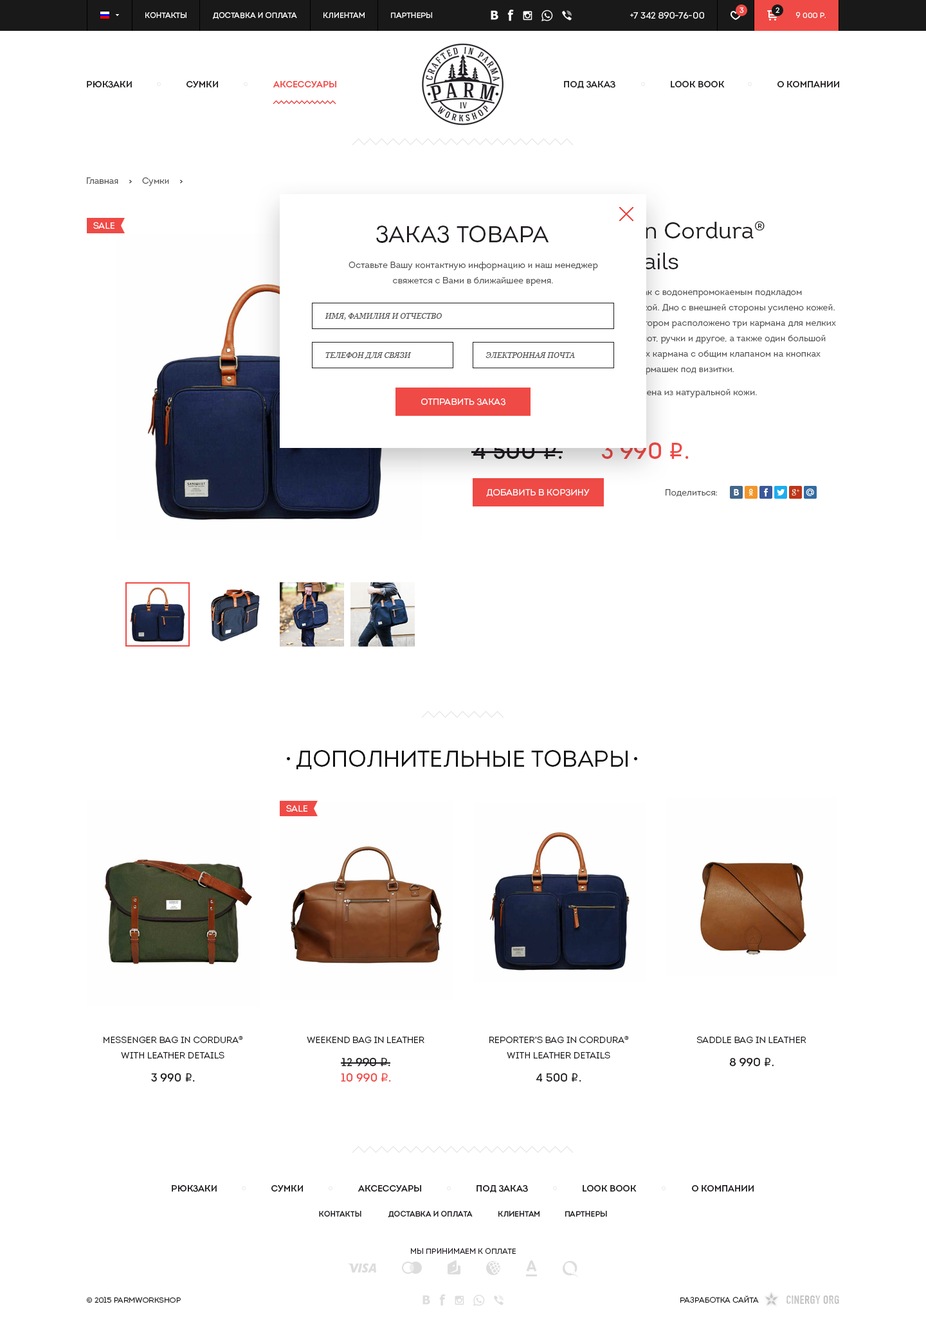
<style>
.page{position:relative;width:926px;height:1322px;background:#ffffff}
.page>*{position:absolute;margin:0}
.t1{font:7.7px "Intro-Book";color:#ffffff;text-transform:uppercase}
.t2{font:9px "Intro-Book";color:#ffffff;text-transform:uppercase}
.t3{font:7.7px "Intro-Book";letter-spacing:0.1em;color:#ffffff;text-transform:uppercase}
.t4{font:9px "Intro-Regular";color:#1f1b20;text-transform:uppercase}
.t5{font:9px "Intro-Regular";color:#ef4a46;text-transform:uppercase}
.t6{font:9px "Intro-Book";color:#555555}
.t7{font:9px "Intro-Book";color:#fefefe;text-transform:uppercase}
.t8{font:23.1px/30.9px "Intro-Book"}
.t9{font:23.1px "Intro-Book";color:#1f1b20;text-transform:uppercase}
.t10{font:9px/15.4px "Intro-Book";color:#555555}
.t11{font:9px/15.4px "Intro-Book"}
.t12{font:9px/23.1px "Intro-Book"}
.t13{font:7.7px "Georgia-Italic";color:#555555;text-transform:uppercase}
.t14{font:23.1px "Intro-Regular";color:#1f1b20}
.t15{font:23.1px "ALSRubl";color:#1f1b20}
.t16{font:23.1px "MyriadPro-Regular";color:#1f1b20}
.t17{font:23.1px "Intro-Regular"}
.t18{font:23.1px "ALSRubl"}
.t19{font:23.1px "MyriadPro-Regular"}
.t20{font:23.1px "Intro-Book";color:#111111;text-transform:uppercase}
.t21{font:9px/15.4px "Intro-Book";color:#1f1b20;text-transform:uppercase}
.t22{font:11.6px/23.1px "Intro-Regular";color:#1f1b20;text-transform:uppercase}
.t23{font:11.6px/23.1px "ALSRubl";color:#1f1b20}
.t24{font:11.6px/23.1px "MyriadPro-Regular";color:#1f1b20}
.t25{font:11.6px/15.4px "Intro-Regular";color:#ef4a46;text-transform:uppercase}
.t26{font:11.6px/15.4px "ALSRubl";color:#ef4a46}
.t27{font:11.6px/15.4px "MyriadPro-Regular";color:#ef4a46}
.t28{font:7.7px "Intro-Regular";color:#1f1b20;text-transform:uppercase}
.t29{font:7.7px "Intro-Book";color:#1f1b20;text-transform:uppercase}
</style>
<div class="page">
<p class="t1" style="left:145px;top:12px;width:41px;height:6px">Контакты</p>
<p class="t1" style="left:213px;top:12px;width:84px;height:7px">Доставка и оплата</p>
<p class="t1" style="left:323px;top:12px;width:41px;height:6px">Клиентам</p>
<p class="t1" style="left:391px;top:12px;width:41px;height:6px">Партнеры</p>
<p class="t2" style="left:630px;top:12px;width:74px;height:7px">+7 342 890-76-00</p>
<p class="t3" style="left:739px;top:7px;width:5px;height:6px">3</p>
<p class="t3" style="left:775px;top:7px;width:4px;height:6px">2</p>
<p class="t1" style="left:796px;top:12px;width:29px;height:6px">9 000 р.</p>
<p class="t4" style="left:87px;top:80px;width:45px;height:8px">Рюкзаки</p>
<p class="t4" style="left:186px;top:80px;width:32px;height:8px">Сумки</p>
<p class="t5" style="left:273px;top:80px;width:63px;height:8px">Аксессуары</p>
<p class="t4" style="left:564px;top:80px;width:51px;height:9px">Под заказ</p>
<p class="t4" style="left:670px;top:80px;width:54px;height:7px">Look Book</p>
<p class="t4" style="left:777px;top:80px;width:62px;height:7px">О компании</p>
<p class="t6" style="left:87px;top:177px;width:82px;height:9px">Главная          Сумки</p>
<p class="t7" style="left:93px;top:222px;width:21px;height:7px">SALE</p>
<p class="t8" style="left:473px;top:221px;width:291px;height:49px">Reporter's bag in Cordura®<br>with leather details</p>
<p class="t9" style="left:376px;top:226px;width:172px;height:17px">Заказ товара</p>
<p class="t10" style="left:348px;top:262px;width:250px;height:24px;text-align:center">Оставьте Вашу контактную информацию и наш менеджер<br>свяжется с Вами в ближайшее время.</p>
<p class="t11" style="left:473px;top:289px;width:363px;height:124px">Большая и вместительная сумка - рюкзак с водонепромокаемым подкладом<br>из нейлона. Задняя стенка усилена пенкой. Дно с внешней стороны усилено кожей.<br>Один внутренний отдел на молнии, в котором расположено три кармана для мелких<br>вещей, таких как телефон, ключи, блокнот, ручки и другое, а также один большой<br>карман на молнии. Два больших внешних кармана с общим клапаном на кнопках<br>и один небольшой внешний кожаный кармашек под визитки.<br><span class="t12">Материал 100% хлопок, отделка выполнена из натуральной кожи.<br></span>Размер 40 x 45 x 12 см.</p>
<p class="t13" style="left:325px;top:313px;width:117px;height:7px">Имя, фамилия и отчество</p>
<p class="t13" style="left:325px;top:352px;width:86px;height:7px">Телефон для связи</p>
<p class="t13" style="left:485px;top:352px;width:90px;height:6px">Электронная почта</p>
<p class="t2" style="left:421px;top:398px;width:84px;height:8px">Отправить заказ</p>
<p class="t14" style="left:473px;top:442px;width:89px;height:17px">4 500 <span class="t15">i</span><span class="t16">.</span></p>
<p class="t17" style="left:601px;top:442px;width:87px;height:17px">3 990 <span class="t18">i</span><span class="t19">.</span></p>
<p class="t2" style="left:486px;top:489px;width:104px;height:8px">Добавить в корзину</p>
<p class="t6" style="left:665px;top:489px;width:52px;height:8px">Поделиться:</p>
<p class="t20" style="left:296px;top:750px;width:331px;height:20px">Дополнительные товары</p>
<p class="t7" style="left:286px;top:805px;width:21px;height:7px">SALE</p>
<p class="t21" style="left:104px;top:1036px;width:139px;height:46px;text-align:center">Messenger bag in Cordura®<br>with leather details<br><span class="t22">3 990 </span><span class="t23">i</span><span class="t24">.</span></p>
<p class="t21" style="left:307px;top:1036px;width:117px;height:46px;text-align:center">Weekend bag in leather<br><span class="t22">12 990 </span><span class="t23">i</span><span class="t24">.<br></span><span class="t25">10 990 </span><span class="t26">i</span><span class="t27">.</span></p>
<p class="t21" style="left:489px;top:1036px;width:140px;height:46px;text-align:center">Reporter's bag in Cordura®<br>with leather details<br><span class="t22">4 500 </span><span class="t23">i</span><span class="t24">.</span></p>
<p class="t21" style="left:696px;top:1036px;width:110px;height:30px;text-align:center">Saddle bag in leather<br><span class="t22">8 990 </span><span class="t23">i</span><span class="t24">.</span></p>
<p class="t4" style="left:172px;top:1185px;width:45px;height:7px">Рюкзаки</p>
<p class="t4" style="left:271px;top:1185px;width:32px;height:7px">Сумки</p>
<p class="t4" style="left:357px;top:1185px;width:64px;height:7px">Аксессуары</p>
<p class="t4" style="left:476px;top:1185px;width:52px;height:8px">Под заказ</p>
<p class="t4" style="left:582px;top:1185px;width:54px;height:7px">Look Book</p>
<p class="t4" style="left:692px;top:1185px;width:61px;height:7px">О компании</p>
<p class="t28" style="left:319px;top:1211px;width:42px;height:6px">Контакты</p>
<p class="t28" style="left:388px;top:1211px;width:85px;height:7px">Доставка и оплата</p>
<p class="t28" style="left:498px;top:1211px;width:41px;height:6px">Клиентам</p>
<p class="t28" style="left:565px;top:1211px;width:42px;height:6px">Партнеры</p>
<p class="t29" style="left:411px;top:1248px;width:105px;height:6px">Мы принимаем к оплате</p>
<p class="t29" style="left:87px;top:1297px;width:94px;height:6px">© 2015 ParmWorkShop</p>
<p class="t29" style="left:680px;top:1296px;width:79px;height:7px">Разработка сайта</p>
</div>
